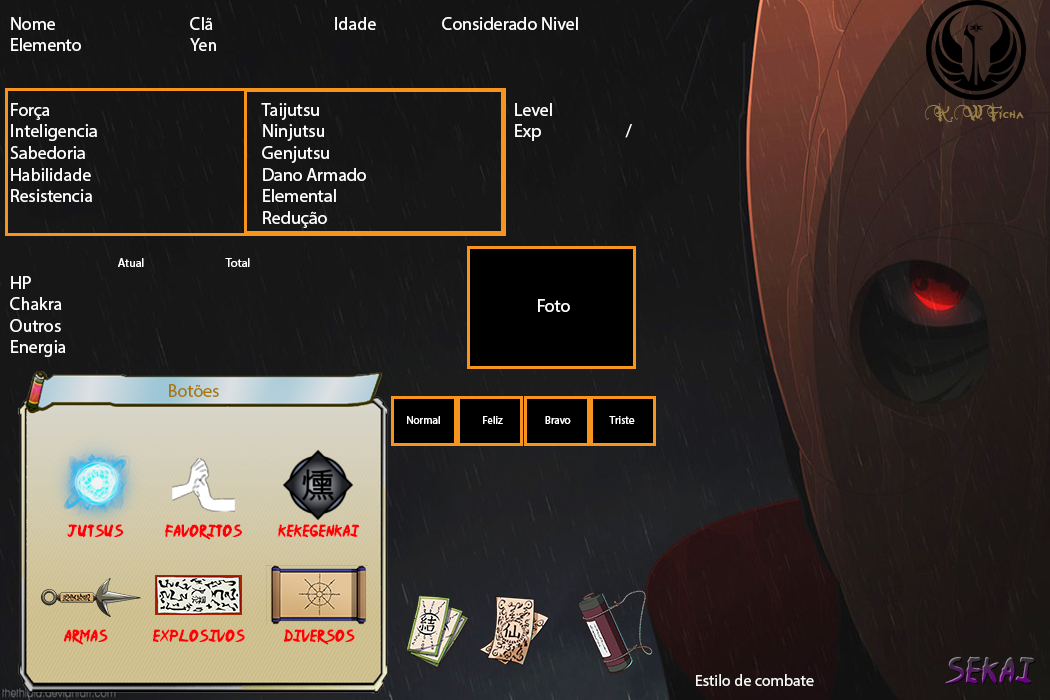
<style>
.page{position:relative;width:1050px;height:700px}
.page>*{position:absolute;margin:0}
.t1{font:18px "MyriadPro-Regular";color:#ffffff}
.t2{font:12px "MyriadPro-Regular";color:#ffffff}
.t3{font:18px "MyriadPro-Regular";color:#a7790a}
.t4{font:18px "NeverwinterNormal";color:#9a7f48}
.t5{font:11px "MyriadPro-Regular";color:#ffffff}
.t6{font:14px "Ninja-Naruto";color:#ff0006}
.t7{font:30px "Ninja-Naruto"}
.t8{font:16px "MyriadPro-Regular";color:#f9f9f9}
</style>
<div class="page">
<p class="t1" style="left:11px;top:17px;width:567px;height:34px">Nome    Clã    Idade  Considerado Nivel   <br>Elemento    Yen</p>
<p class="t1" style="left:10px;top:103px;width:622px;height:294px">Força      Taijutsu      Level<br>Inteligencia     Ninjutsu      Exp    /<br>Sabedoria     Genjutsu<br>Habilidade     Dano Armado<br>Resistencia     Elemental<br>       Redução<br><br> <span class="t2">   Atual   Total  </span> <br>HP                 <br>Chakra<br>Outros<br>Energia<br> <br>                <span class="t3">Botões</span></p>
<p class="t4" style="left:925px;top:103px;width:99px;height:19px">K.W Ficha</p>
<p class="t1" style="left:538px;top:299px;width:32px;height:13px">Foto</p>
<p class="t5" style="left:407px;top:416px;width:228px;height:8px">Normal                  Feliz                  Bravo                 Triste</p>
<p class="t6" style="left:67px;top:524px;width:293px;height:16px">Jutsus     Favoritos         Kekegenkai</p>
<p class="t6" style="left:64px;top:629px;width:291px;height:16px">aRMAS                 Explosivos  Diversos</p>
<p class="t7" style="left:945px;top:656px;width:91px;height:28px">Sekai</p>
<p class="t8" style="left:696px;top:674px;width:118px;height:12px">Estilo de combate</p>
</div>
